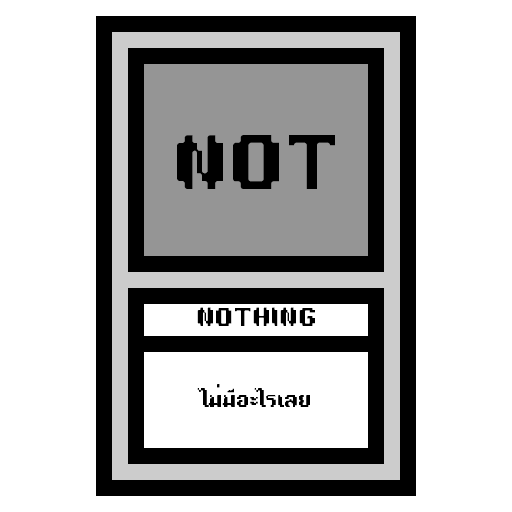
<style>
.page{position:relative;width:512px;height:512px;background:#ffffff}
.page>*{position:absolute;margin:0}
.t1{font:72px "TA16BIT-Regular";color:#000000}
.t2{font:24px "TA16BIT-Regular";color:#000000}
.t3{font:18px "TA16BIT-Regular";color:#000000}
</style>
<div class="page">
<p class="t1" style="left:177px;top:135px;width:158px;height:54px">NOT</p>
<p class="t2" style="left:197px;top:307px;width:118px;height:19px">NOTHING</p>
<p class="t3" style="left:197px;top:384px;width:113px;height:23px">ไม่มีอะไรเลย</p>
</div>
